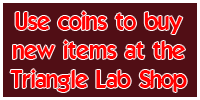
<style>
.page{position:relative;width:200px;height:100px;background:#510e15}
.page>*{position:absolute;margin:0}
.t1{font:24px "ELEGANCE";color:#ff0000}
</style>
<div class="page">
<p class="t1" style="left:10px;top:11px;width:177px;height:81px;text-align:center">Use coins to buy<br>new items at the<br>Triangle Lab Shop</p>
</div>
